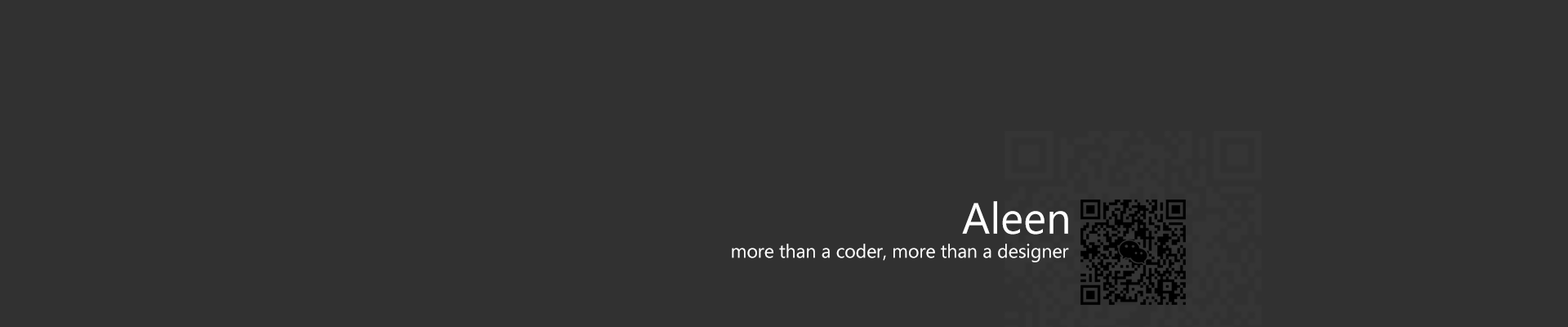
<style>
.page{position:relative;width:1568px;height:327px;background:#313131}
.page>*{position:absolute;margin:0}
.t1{font:43.6px "MicrosoftNewTaiLue";color:#ffffff}
.t2{font:18.7px "MicrosoftNewTaiLue";color:#ffffff}
</style>
<div class="page">
<p class="t1" style="left:962px;top:201px;width:106px;height:33px">Aleen</p>
<p class="t2" style="left:732px;top:243px;width:337px;height:19px">more than a coder, more than a designer</p>
</div>
